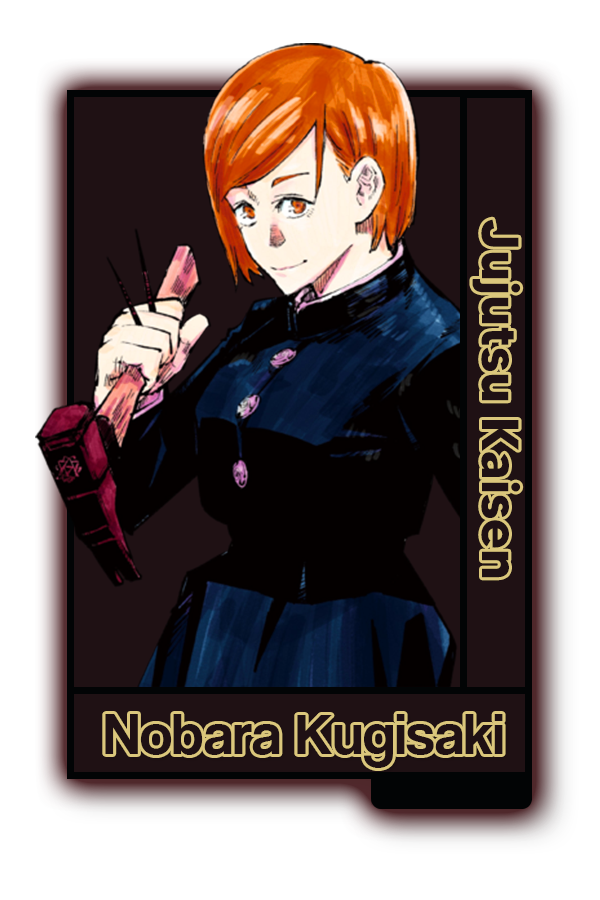
<style>
.page{position:relative;width:600px;height:900px;background:#1f1114}
.page>*{position:absolute;margin:0}
.t1{font:52px "MADETOMMY-Bold";color:#1e1214}
.t2{font:60.3px "CoolveticaRg-Regular";color:#1e1214}
</style>
<div class="page">
<p class="t1" style="left:472px;top:219px;width:49px;height:359px;rotate:90deg">Jujutsu Kaisen</p>
<p class="t2" style="left:105px;top:714px;width:398px;height:54px">Nobara Kugisaki</p>
</div>
